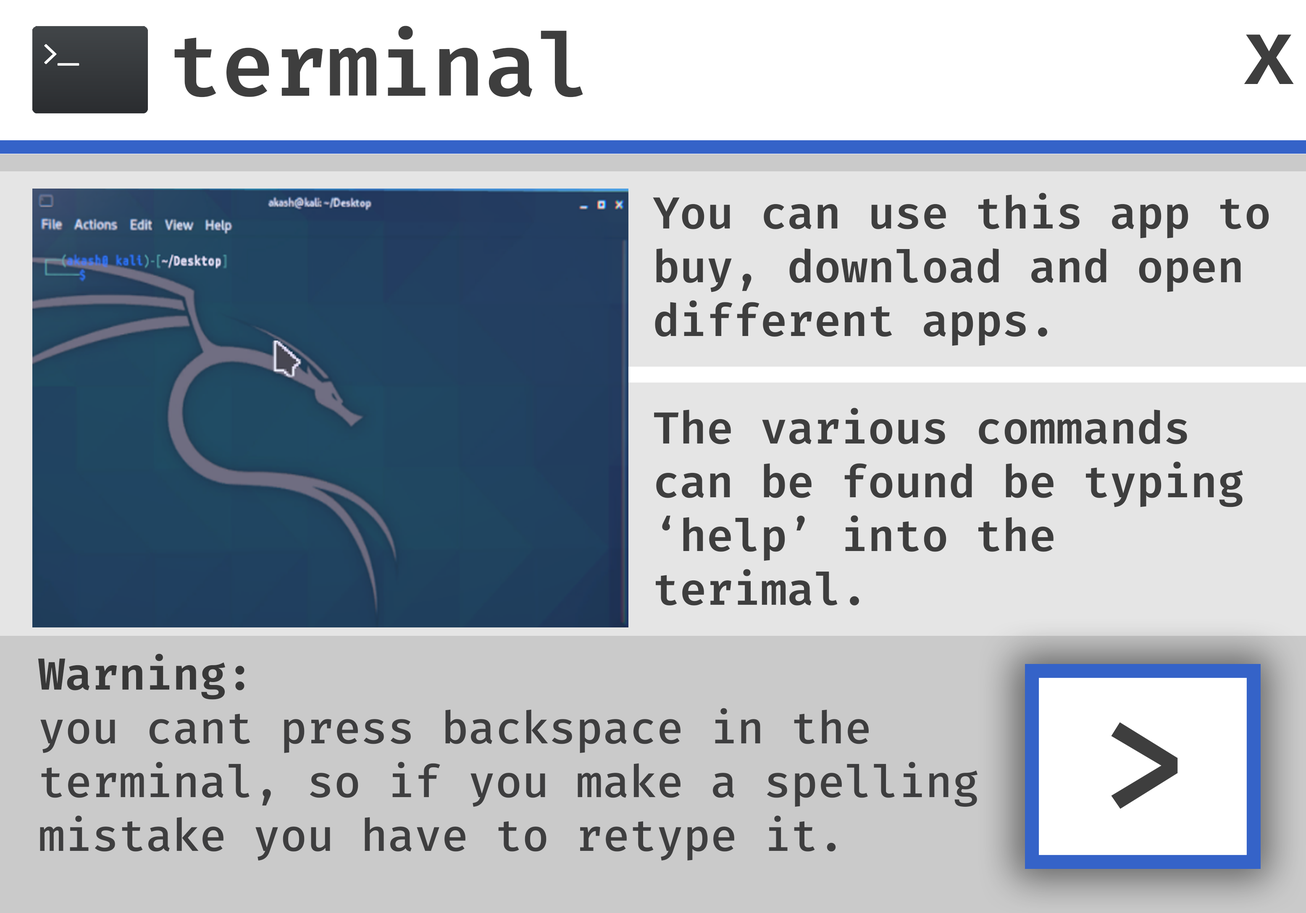
<style>
.page{position:relative;width:1306px;height:913px;background:#e5e5e5}
.page>*{position:absolute;margin:0}
.t1{font:87.7px "FiraCode-SemiBold";color:#3e3e3e}
.t2{font:93.4px "FiraCode_588.000wght";color:#3e3e3e}
.t3{font:44.8px "FiraCode_588.000wght";color:#3e3e3e}
.t4{font:44.8px "FiraCode_495.000wght";color:#3e3e3f}
.t5{font:44.8px "FiraCode_621.000wght";color:#383838}
.t6{font:148.8px "FiraCode_574.000wght";color:#3e3e3e}
</style>
<div class="page">
<p class="t1" style="left:174px;top:26px;width:409px;height:71px">terminal</p>
<p class="t2" style="left:1244px;top:34px;width:50px;height:50px">x</p>
<p class="t3" style="left:653px;top:193px;width:616px;height:413px">You can use this app to<br>buy, download and open <br>different apps.<br><br>The various commands<br>can be found be typing<br>‘help’ into the<br>terimal.</p>
<p class="t4" style="left:38px;top:654px;width:940px;height:207px"><span class="t5">Warning:<br></span>you cant press backspace in the<br>terminal, so if you make a spelling<br>mistake you have to retype it.</p>
<p class="t6" style="left:1111px;top:722px;width:67px;height:87px">&gt;</p>
</div>
